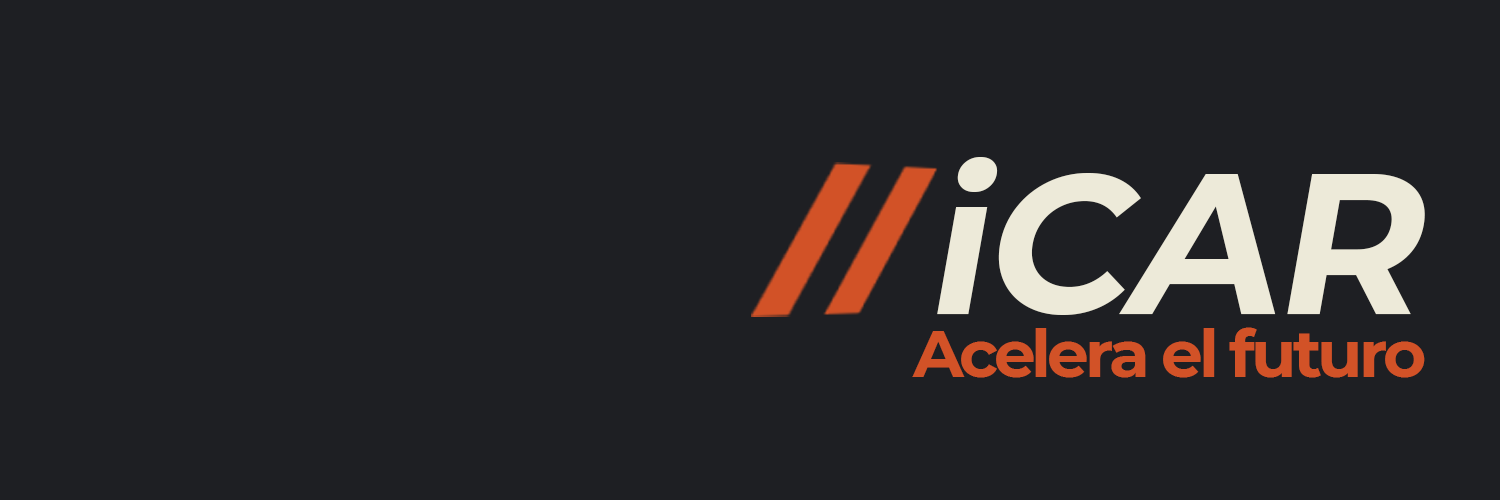
<style>
.page{position:relative;width:1500px;height:500px;background:#1e1f23}
.page>*{position:absolute;margin:0}
.t1{font:198.6px "Montserrat-Bold";letter-spacing:-0.01em;color:#edead9;font-style:italic}
.t2{font:66.2px "Montserrat-Bold";letter-spacing:-0.06em;color:#d25227}
</style>
<div class="page">
<p class="t1" style="left:937px;top:157px;width:488px;height:158px">iCAR</p>
<p class="t2" style="left:912px;top:327px;width:513px;height:51px">Acelera el futuro</p>
</div>
